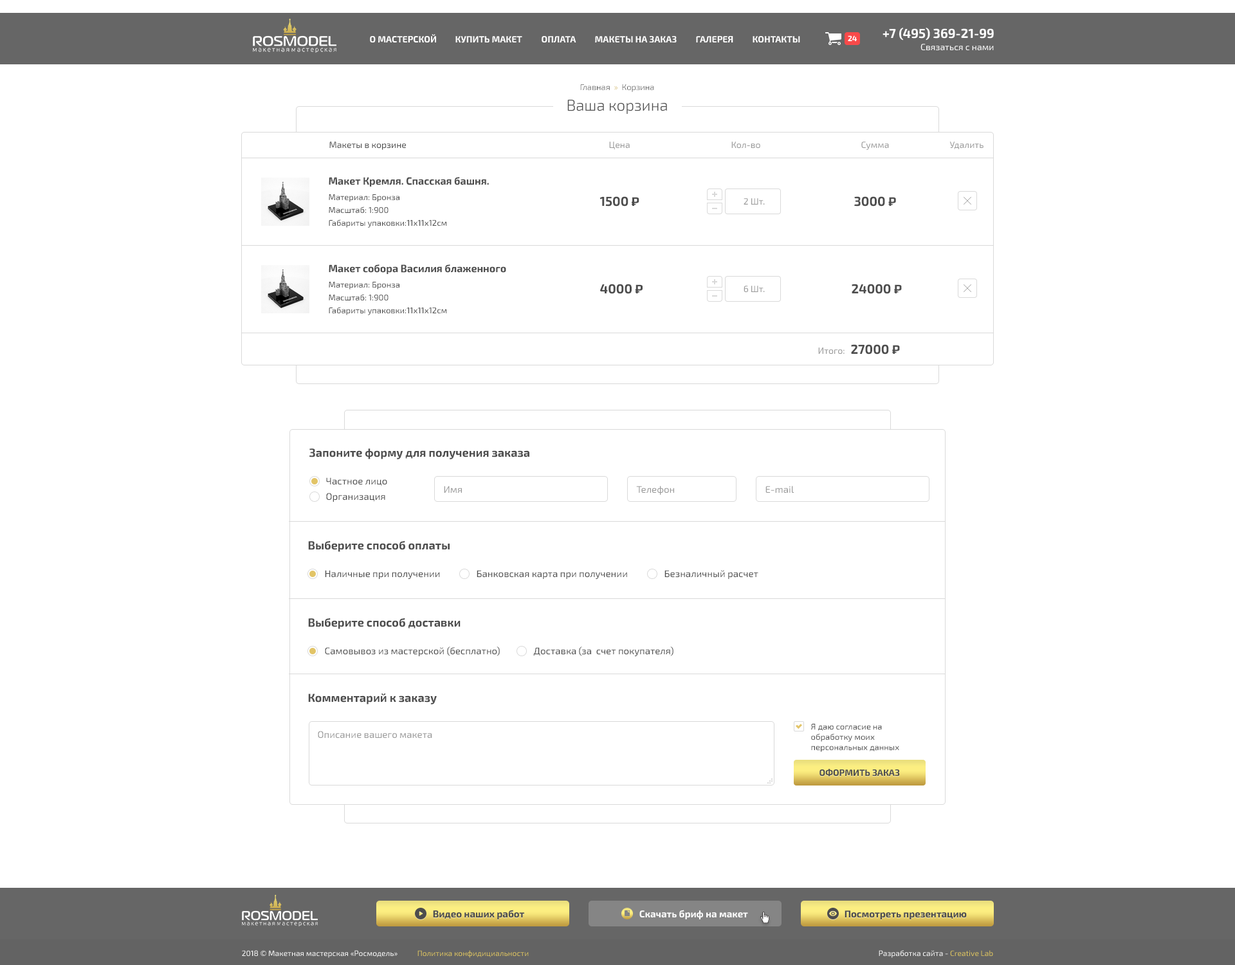
<style>
.page{position:relative;width:1235px;height:965px;background:#ffffff}
.page>*{position:absolute;margin:0}
.t1{font:8.4px "Exo2-Light";color:#4d4d4d}
.t2{font:8.4px "Exo2-Light";color:#d1b558}
.t3{font:15.4px "Exo2-Light";color:#4d4d4d}
.t4{font:9px "Exo2-Regular";color:#4d4d4d}
.t5{font:9px "Exo2-Regular";color:#999999}
.t6{font:10.3px "Exo2-Bold";color:#4d4d4d}
.t7{font:8.4px/12.9px "Exo2-Regular";color:#4d4d4d}
.t8{font:12.9px "Exo2-Bold";color:#4d4d4d}
.t9{font:12.9px "Play-Bold";color:#4d4d4d}
.t10{font:11.6px "Exo2-Bold";color:#4d4d4d}
.t11{font:9.7px "Exo2-Regular";color:#4d4d4d}
.t12{font:9.7px "Exo2-Regular";color:#999999}
.t13{font:8.4px/10.3px "Exo2-Regular";color:#4d4d4d}
.t14{font:9px "Exo2-Bold";color:#4d4d4d;text-transform:uppercase}
</style>
<div class="page">
<p class="t1" style="left:580px;top:84px;width:74px;height:8px">Главная  <span class="t2">»</span>  Корзина</p>
<p class="t3" style="left:568px;top:100px;width:99px;height:14px">Ваша корзина</p>
<p class="t4" style="left:329px;top:142px;width:77px;height:8px">Макеты в корзине</p>
<p class="t5" style="left:609px;top:142px;width:21px;height:8px">Цена</p>
<p class="t5" style="left:732px;top:142px;width:29px;height:7px">Кол-во</p>
<p class="t5" style="left:862px;top:142px;width:27px;height:8px">Сумма</p>
<p class="t5" style="left:950px;top:142px;width:34px;height:7px">Удалить</p>
<p class="t6" style="left:329px;top:177px;width:160px;height:10px">Макет Кремля. Спасская башня.</p>
<p class="t7" style="left:329px;top:194px;width:118px;height:34px">Материал: Бронза<br>Масштаб: 1:900<br>Габариты упаковки:11х11х12см</p>
<p class="t8" style="left:600px;top:196px;width:40px;height:11px">1500 <span class="t9">₽</span></p>
<p class="t8" style="left:855px;top:196px;width:41px;height:11px">3000 <span class="t9">₽</span></p>
<p class="t5" style="left:744px;top:198px;width:21px;height:7px">2 Шт.</p>
<p class="t6" style="left:329px;top:264px;width:177px;height:10px">Макет собора Василия блаженного</p>
<p class="t7" style="left:329px;top:282px;width:118px;height:33px">Материал: Бронза<br>Масштаб: 1:900<br>Габариты упаковки:11х11х12см</p>
<p class="t8" style="left:600px;top:284px;width:43px;height:10px">4000 <span class="t9">₽</span></p>
<p class="t5" style="left:744px;top:286px;width:21px;height:7px">6 Шт.</p>
<p class="t8" style="left:852px;top:284px;width:50px;height:10px">24000 <span class="t9">₽</span></p>
<p class="t5" style="left:818px;top:347px;width:27px;height:8px">Итого:</p>
<p class="t8" style="left:851px;top:344px;width:49px;height:11px">27000 <span class="t9">₽</span></p>
<p class="t10" style="left:310px;top:448px;width:220px;height:11px">Запоните форму для получения заказа</p>
<p class="t11" style="left:326px;top:477px;width:61px;height:9px">Частное лицо</p>
<p class="t12" style="left:444px;top:486px;width:18px;height:7px">Имя</p>
<p class="t12" style="left:636px;top:486px;width:38px;height:9px">Телефон</p>
<p class="t12" style="left:766px;top:486px;width:28px;height:8px">E-mail</p>
<p class="t11" style="left:326px;top:493px;width:59px;height:9px">Организация</p>
<p class="t10" style="left:308px;top:541px;width:142px;height:11px">Выберите способ оплаты</p>
<p class="t11" style="left:325px;top:570px;width:115px;height:9px">Наличные при получении</p>
<p class="t11" style="left:477px;top:570px;width:150px;height:9px">Банковская карта при получении</p>
<p class="t11" style="left:665px;top:570px;width:94px;height:9px">Безналичный расчет</p>
<p class="t10" style="left:308px;top:618px;width:153px;height:11px">Выберите способ доставки</p>
<p class="t11" style="left:325px;top:647px;width:175px;height:9px">Самовывоз из мастерской (бесплатно)</p>
<p class="t11" style="left:533px;top:647px;width:141px;height:9px">Доставка (за  счет покупателя)</p>
<p class="t10" style="left:308px;top:694px;width:129px;height:11px">Комментарий к заказу</p>
<p class="t13" style="left:811px;top:724px;width:89px;height:28px">Я даю согласие на <br>обработку моих <br>персональных данных</p>
<p class="t12" style="left:318px;top:731px;width:114px;height:8px">Описание вашего макета</p>
<p class="t14" style="left:820px;top:769px;width:80px;height:8px">Оформить заказ</p>
</div>
